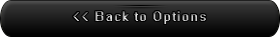
<style>
.page{position:relative;width:280px;height:37px}
.page>*{position:absolute;margin:0}
.t1{font:13px "System";letter-spacing:0.05em}
</style>
<div class="page">
<p class="t1" style="left:72px;top:11px;width:134px;height:13px">&lt;&lt; Back to Options</p>
</div>
